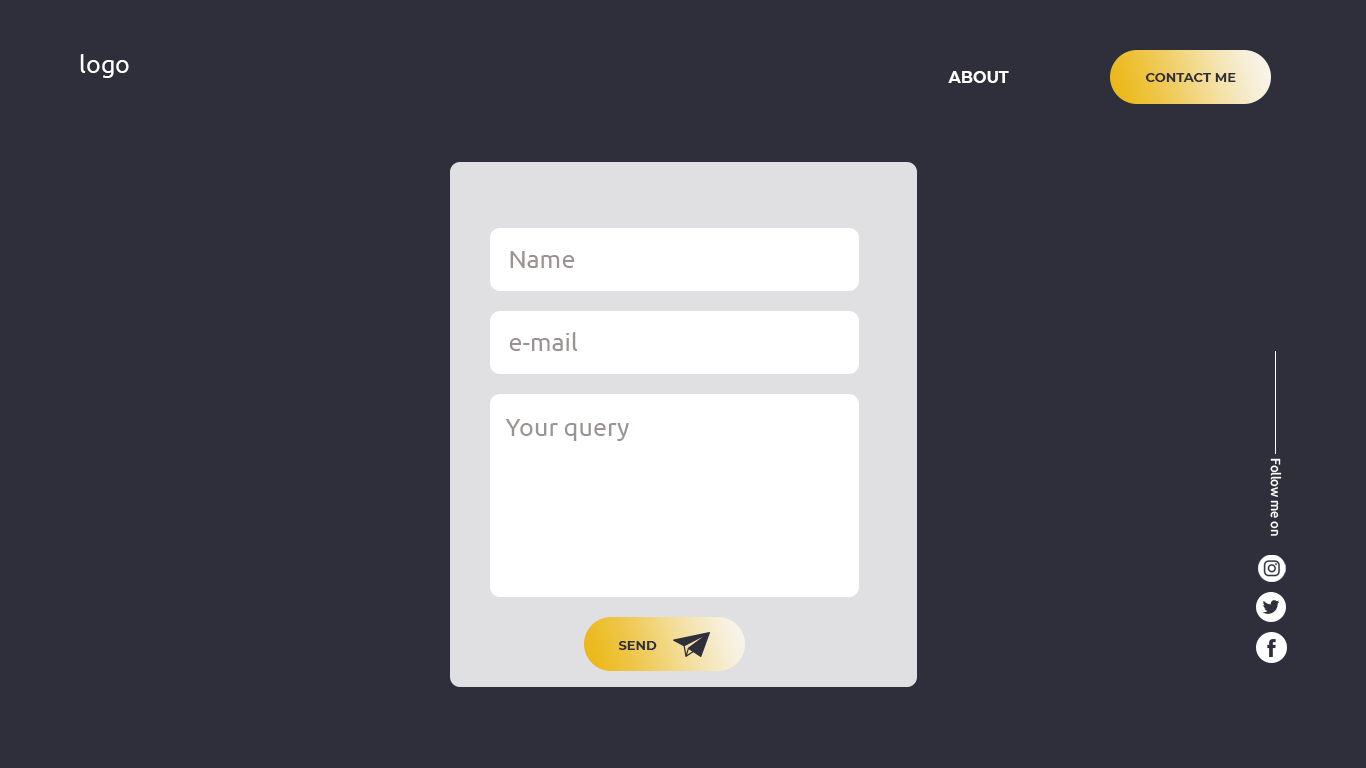
<style>
.page{position:relative;width:1366px;height:768px;background:#2e2f3a}
.page>*{position:absolute;margin:0}
.t1{font:25px "Ubuntu-Regular";color:#ffffff}
.t2{font:16px "Montserrat-Bold";color:#ffffff}
.t3{font:13px "Montserrat-Bold";color:#2e2f3a;text-transform:uppercase}
.t4{font:25px "Ubuntu-Regular";color:#9b9393}
.t5{font:13px "Ubuntu-Regular";color:#ffffff}
</style>
<div class="page">
<p class="t1" style="left:80px;top:54px;width:49px;height:24px">logo</p>
<p class="t2" style="left:948px;top:71px;width:61px;height:12px">ABOUT</p>
<p class="t3" style="left:1145px;top:73px;width:91px;height:9px">contact me</p>
<p class="t4" style="left:510px;top:251px;width:65px;height:17px">Name</p>
<p class="t4" style="left:509px;top:332px;width:69px;height:19px">e-mail</p>
<p class="t4" style="left:505px;top:419px;width:124px;height:22px">Your query</p>
<p class="t5" style="left:1270px;top:458px;width:12px;height:78px;rotate:90deg">Follow me on</p>
<p class="t3" style="left:618px;top:641px;width:39px;height:9px">send</p>
</div>
